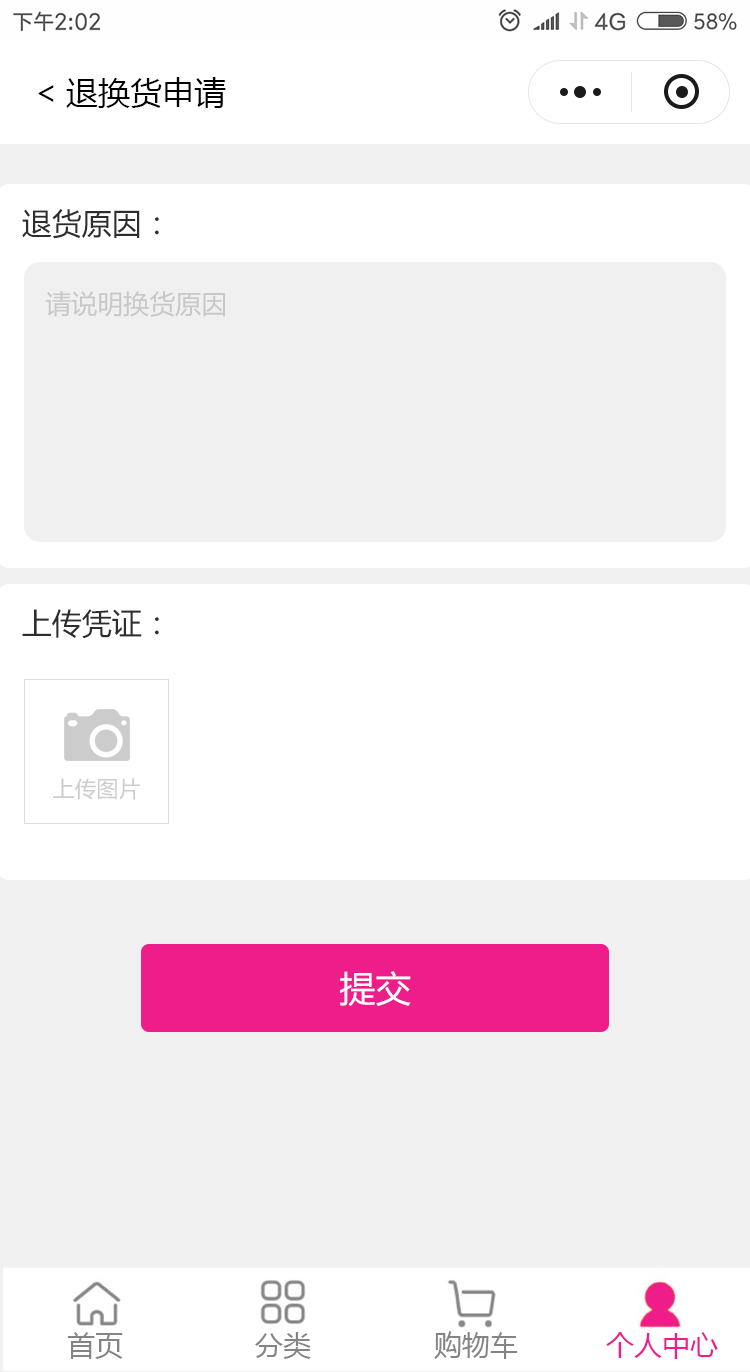
<style>
.page{position:relative;width:750px;height:1372px;background:#f0f0f0}
.page>*{position:absolute;margin:0}
.t1{font:32px "MicrosoftYaHei";color:#000000}
.t2{font:30px "MicrosoftYaHei";color:#2d2d2d}
.t3{font:26px "MicrosoftYaHei";color:#c9c8c8}
.t4{font:22px "MicrosoftYaHei";color:#cccccc}
.t5{font:36px "MicrosoftYaHei";color:#ffffff}
</style>
<div class="page">
<p class="t1" style="left:38px;top:77px;width:188px;height:31px">&lt;退换货申请</p>
<p class="t2" style="left:22px;top:209px;width:137px;height:30px">退货原因：</p>
<p class="t3" style="left:45px;top:291px;width:180px;height:26px">请说明换货原因</p>
<p class="t2" style="left:22px;top:609px;width:137px;height:30px">上传凭证：</p>
<p class="t4" style="left:53px;top:778px;width:87px;height:22px">上传图片</p>
<p class="t5" style="left:340px;top:971px;width:71px;height:35px">提交</p>
</div>
